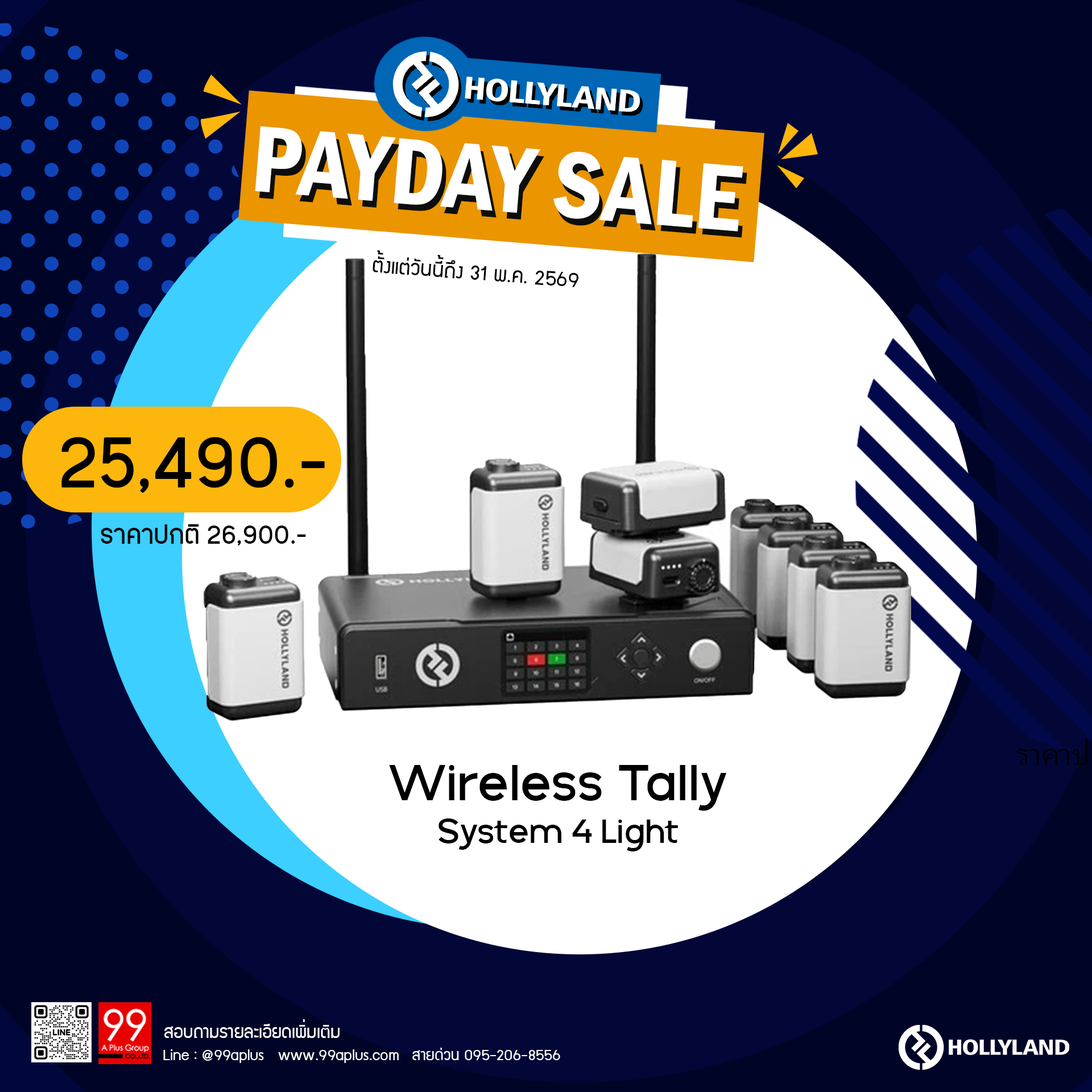
<style>
.page{position:relative;width:1092px;height:1092px;background:#ffffff}
.page>*{position:absolute;margin:0}
.t1{font:97.5px "FranklinGothic-DemiCond";color:#ffffff}
.t2{font:97.5px "FranklinGothic-DemiCond"}
.t3{font:23.2px "supermarket";color:#000000}
.t4{font:83.5px "PK-NakhonPathom-Demo";color:#000000}
.t5{font:30.3px "PK-NakhonPathom-Demo";color:#000000}
.t6{font:54px "GalakPro-Demo";color:#000000}
.t7{font:35.6px "GalakPro-Demo";color:#000000}
.t8{font:19.8px "supermarket";color:#ffffff}
.t9{font:17.2px "supermarket";color:#ffffff}
</style>
<div class="page">
<p class="t1" style="left:255px;top:126px;width:488px;height:105px;rotate:5deg">PAYDAY SALE</p>
<p class="t2" style="left:259px;top:133px;width:488px;height:105px;rotate:5deg">PAYDAY SALE</p>
<p class="t3" style="left:373px;top:250px;width:205px;height:37px;rotate:4deg">ตั้งแต่วันนี้ถึง 31 พ.ค. 2569</p>
<p class="t4" style="left:61px;top:437px;width:264px;height:56px">25,490.-</p>
<p class="t5" style="left:101px;top:524px;width:205px;height:21px">ราคาปกติ 26,900.-</p>
<p class="t6" style="left:389px;top:765px;width:338px;height:46px">Wireless Tally</p>
<p class="t7" style="left:439px;top:818px;width:239px;height:33px">System 4 Light</p>
<p class="t8" style="left:164px;top:1019px;width:176px;height:19px">สอบถามรายละเอียดเพิ่มเติม</p>
<p class="t9" style="left:163px;top:1049px;width:236px;height:14px">Line : @99aplus   www.99aplus.com</p>
<p class="t9" style="left:412px;top:1048px;width:148px;height:12px">สายด่วน 095-206-8556</p>
</div>
